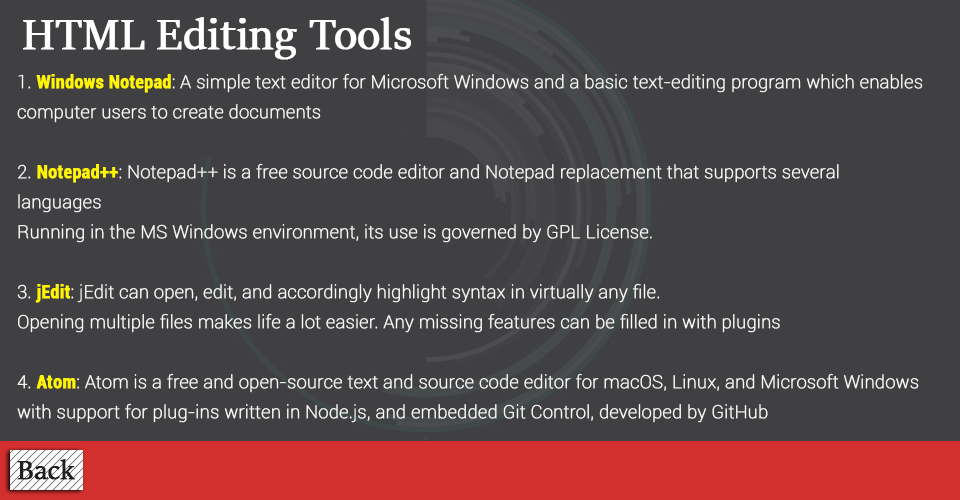
<style>
.page{position:relative;width:960px;height:500px;background:#404042}
.page>*{position:absolute;margin:0}
.t1{font:48px "SitkaBanner";color:#ffffff;font-weight:bold}
.t2{font:18px/30px "Roboto-Thin";color:#ffffff;font-weight:bold}
.t3{font:18px/30px "Roboto-BoldCondensed";color:#fff600;font-weight:bold}
.t4{font:30px "SitkaBanner";color:#1e1e1e;font-weight:bold}
</style>
<div class="page">
<p class="t1" style="left:23px;top:17px;width:388px;height:43px">HTML Editing Tools</p>
<p class="t2" style="left:17px;top:73px;width:906px;height:350px">1. <span class="t3">Windows Notepad</span>: A simple text editor for Microsoft Windows and a basic text-editing program which enables computer users to create documents<br><br>2. <span class="t3">Notepad++</span>: Notepad++ is a free source code editor and Notepad replacement that supports several languages<br>Running in the MS Windows environment, its use is governed by GPL License. <br><br>3. <span class="t3">jEdit</span>: jEdit can open, edit, and accordingly highlight syntax in virtually any file.<br>Opening multiple files makes life a lot easier. Any missing features can be filled in with plugins<br><br>4. <span class="t3">Atom</span>: Atom is a free and open-source text and source code editor for macOS, Linux, and Microsoft Windows with support for plug-ins written in Node.js, and embedded Git Control, developed by GitHub</p>
<p class="t4" style="left:17px;top:459px;width:59px;height:21px">Back</p>
</div>
